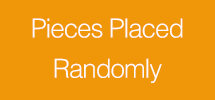
<style>
.page{position:relative;width:215px;height:100px;background:#f09609}
.page>*{position:absolute;margin:0}
.t1{font:26.1px/20.2px "Helvetica-Light";letter-spacing:-0.04em;color:#fffbfb}
</style>
<div class="page">
<p class="t1" style="left:32px;top:18px;width:151px;height:65px;text-align:center">Pieces Placed <br><br>Randomly</p>
</div>
